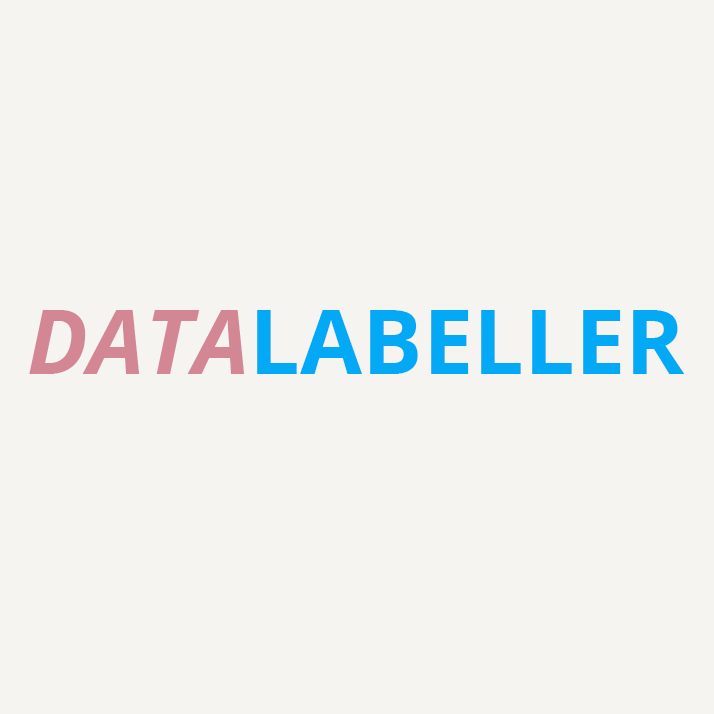
<style>
.page{position:relative;width:714px;height:714px;background:#f5f4f0}
.page>*{position:absolute;margin:0}
.t1{font:90px "OpenSans-Bold";color:#03a9f4}
.t2{font:90px "OpenSans-BoldItalic";color:#d38693}
</style>
<div class="page">
<p class="t1" style="left:29px;top:310px;width:656px;height:64px"><span class="t2">DATA</span>LABELLER</p>
</div>
